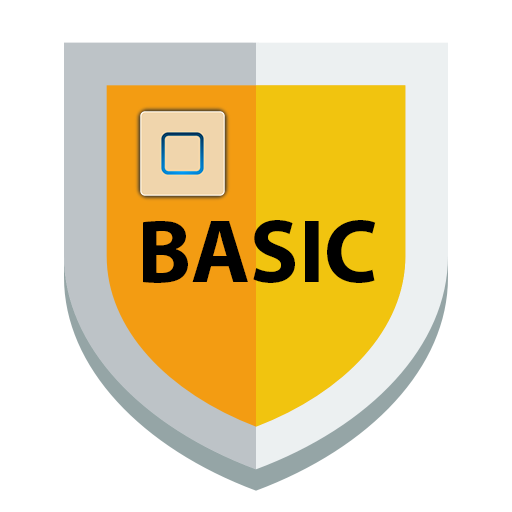
<style>
.page{position:relative;width:512px;height:512px;background:#ffffff}
.page>*{position:absolute;margin:0}
.t1{font:90.2px "MyriadPro-Bold";color:#000000}
</style>
<div class="page">
<p class="t1" style="left:143px;top:220px;width:233px;height:63px">BASIC</p>
</div>
